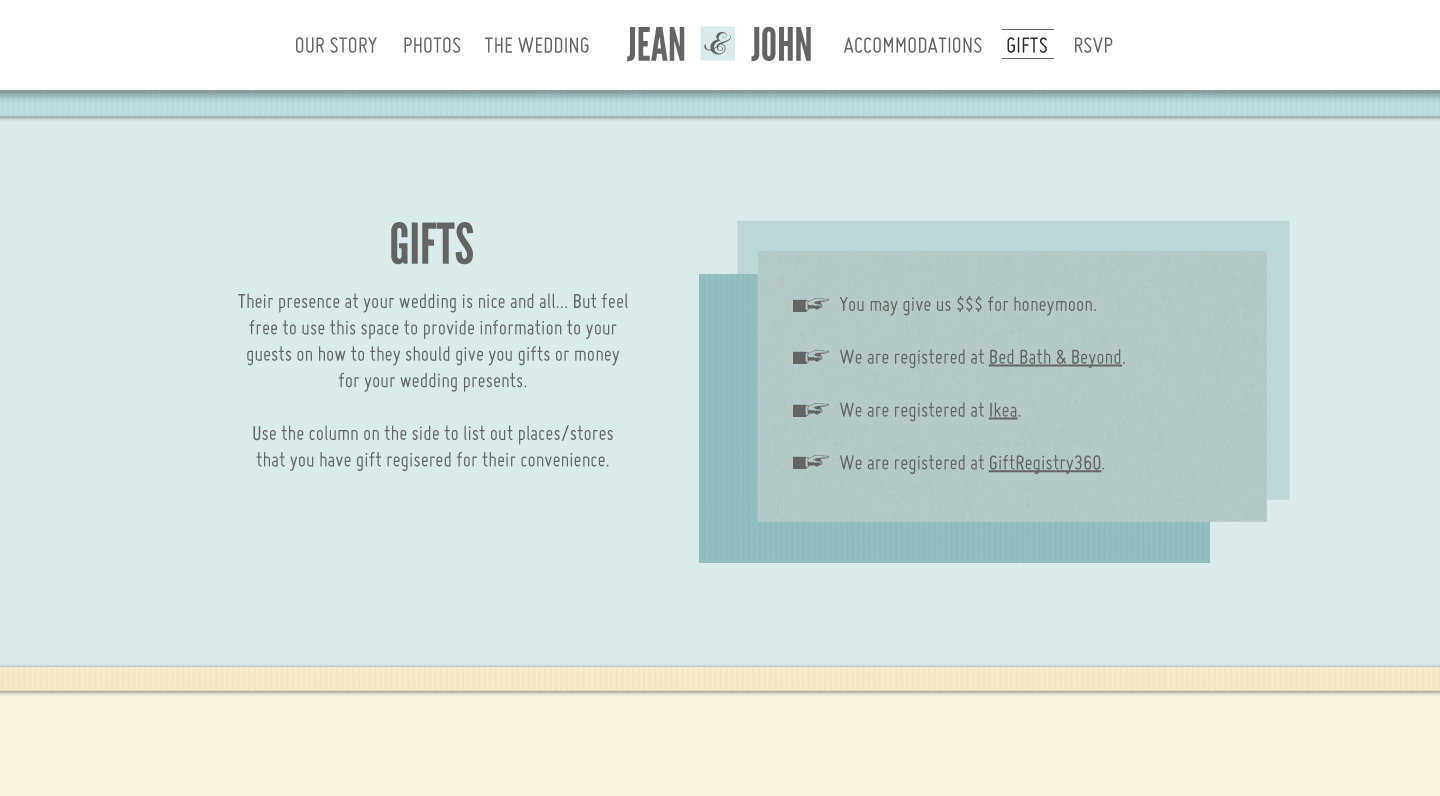
<style>
.page{position:relative;width:1440px;height:796px;background:#d9ebeb}
.page>*{position:absolute;margin:0}
.t1{font:46px "LeagueGothic";color:#656464;text-transform:uppercase}
.t2{font:24px "Miso";color:#656464;text-transform:uppercase}
.t3{font:24px "Miso";color:#2b2b2b;text-transform:uppercase}
.t4{font:56px "LeagueGothic";color:#656464;text-transform:uppercase}
.t5{font:22px "Miso";color:#656464}
.t6{font:22px "Miso";color:#656464;text-decoration:underline}
</style>
<div class="page">
<p class="t1" style="left:627px;top:27px;width:58px;height:35px">JEAN</p>
<p class="t1" style="left:751px;top:26px;width:60px;height:36px">JOHN</p>
<p class="t2" style="left:296px;top:37px;width:81px;height:16px">our story</p>
<p class="t2" style="left:404px;top:37px;width:57px;height:16px">photos</p>
<p class="t2" style="left:484px;top:37px;width:105px;height:16px">the wedding</p>
<p class="t2" style="left:844px;top:37px;width:138px;height:16px">accommodations</p>
<p class="t3" style="left:1007px;top:37px;width:40px;height:16px">gifts</p>
<p class="t2" style="left:1075px;top:37px;width:38px;height:16px">rsvp</p>
<p class="t4" style="left:391px;top:222px;width:82px;height:43px">gifts</p>
<p class="t5" style="left:238px;top:293px;width:390px;height:178px;text-align:center">Their presence at your wedding is nice and all... But feel free to use this space to provide information to your guests on how to they should give you gifts or money for your wedding presents.<br><br>Use the column on the side to list out places/stores that you have gift regisered for their convenience.</p>
<p class="t5" style="left:840px;top:296px;width:285px;height:178px">You may give us $$$ for honeymoon.<br><br>We are registered at <span class="t6">Bed Bath &amp; Beyond</span>.<br><br>We are registered at <span class="t6">Ikea</span>.<br><br>We are registered at <span class="t6">GiftRegistry360</span>.</p>
</div>
